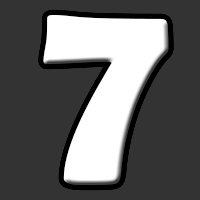
<style>
.page{position:relative;width:200px;height:200px;background:#333333}
.page>*{position:absolute;margin:0}
.t1{font:273px "BerlinSansFBDemi-Bold";color:#ffffff}
</style>
<div class="page">
<p class="t1" style="left:43px;top:15px;width:126px;height:170px">7</p>
</div>
